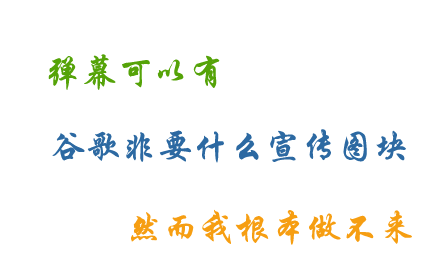
<style>
.page{position:relative;width:440px;height:280px;background:#ffffff}
.page>*{position:absolute;margin:0}
.t1{font:36px "STXingkai";color:#55a308}
.t2{font:36px "STXingkai";color:#2c69a2}
.t3{font:36px "STXingkai";color:#f69e12}
</style>
<div class="page">
<p class="t1" style="left:48px;top:54px;width:172px;height:36px">弹幕可以有</p>
<p class="t2" style="left:52px;top:129px;width:354px;height:34px">谷歌非要什么宣传图块</p>
<p class="t3" style="left:131px;top:209px;width:281px;height:36px">然而我根本做不来</p>
</div>
